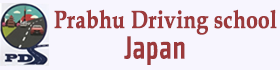
<style>
.page{position:relative;width:280px;height:70px;background:#f7f5fe}
.page>*{position:absolute;margin:0}
.t1{font:25.1px "BookAntiqua-Bold";color:#9c393b;font-weight:bold;scale:0.81 1}
.t2{font:33.2px "ClioCBold-Bold";color:#9c393b;font-weight:bold;scale:0.81 1}
</style>
<div class="page">
<p class="t1" style="left:54px;top:9px;width:223px;height:26px">Prabhu Driving school</p>
<p class="t2" style="left:124px;top:36px;width:61px;height:29px">Japan</p>
</div>
